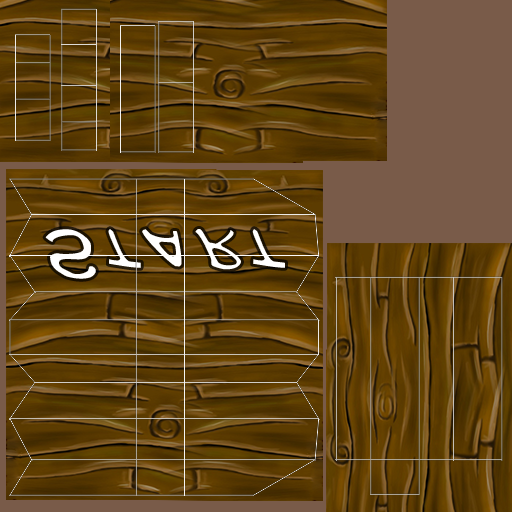
<style>
.page{position:relative;width:512px;height:512px}
.page>*{position:absolute;margin:0}
.t1{font:72.1px "ComicBook";letter-spacing:0.16em}
</style>
<div class="page">
<p class="t1" style="left:44px;top:227px;width:243px;height:54px">Start</p>
</div>
